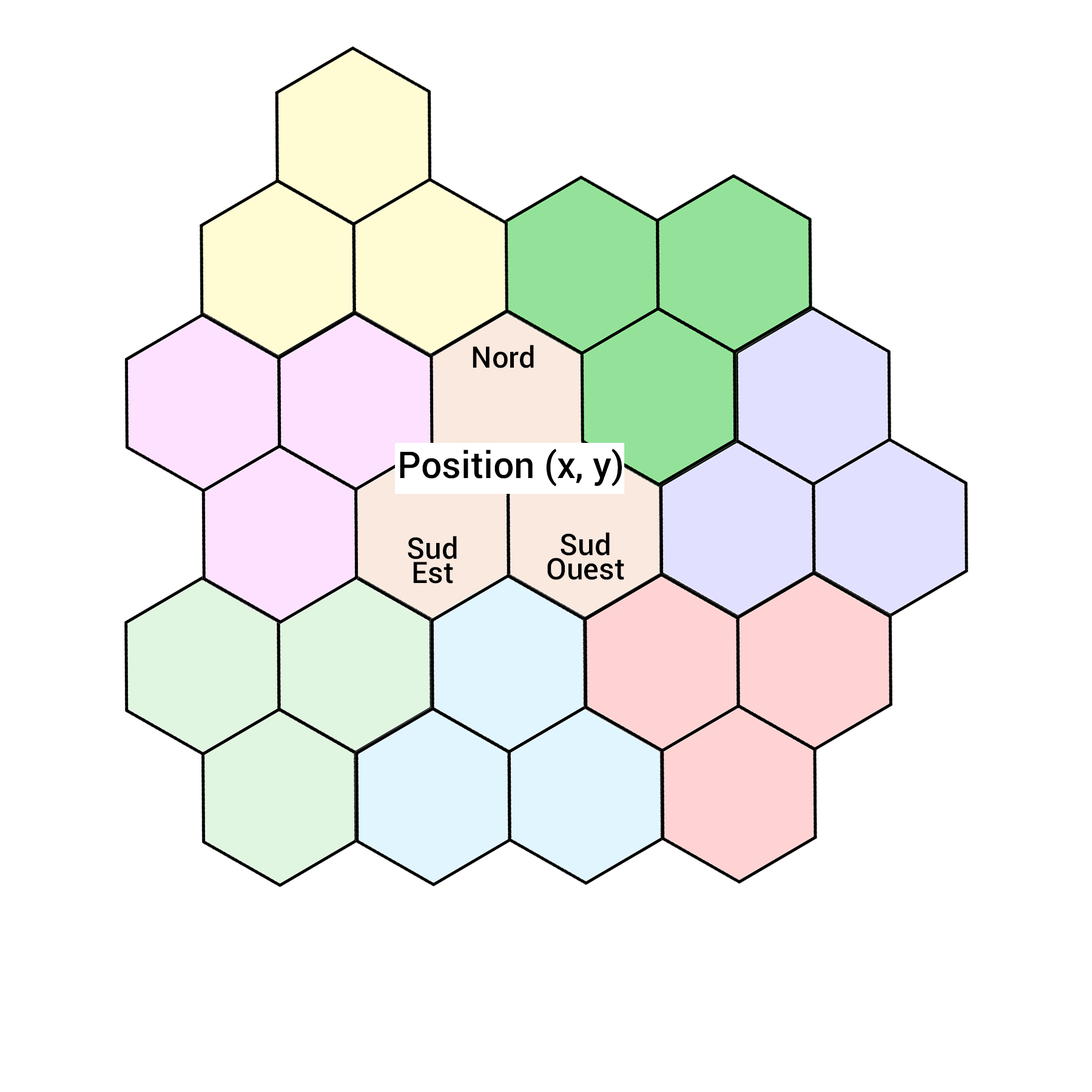
<style>
.page{position:relative;width:1092px;height:1092px;background:#ffffff}
.page>*{position:absolute;margin:0}
.t1{font:29.7px "Roboto-Medium";color:#000000}
.t2{font:29.7px/24.3px "Roboto-Medium";color:#000000}
</style>
<div class="page">
<p class="t1" style="left:473px;top:345px;width:61px;height:23px">Nord</p>
<p class="t2" style="left:547px;top:532px;width:77px;height:48px;text-align:center">Sud<br>Ouest</p>
<p class="t2" style="left:408px;top:536px;width:49px;height:48px;text-align:center">Sud<br>Est</p>
</div>
